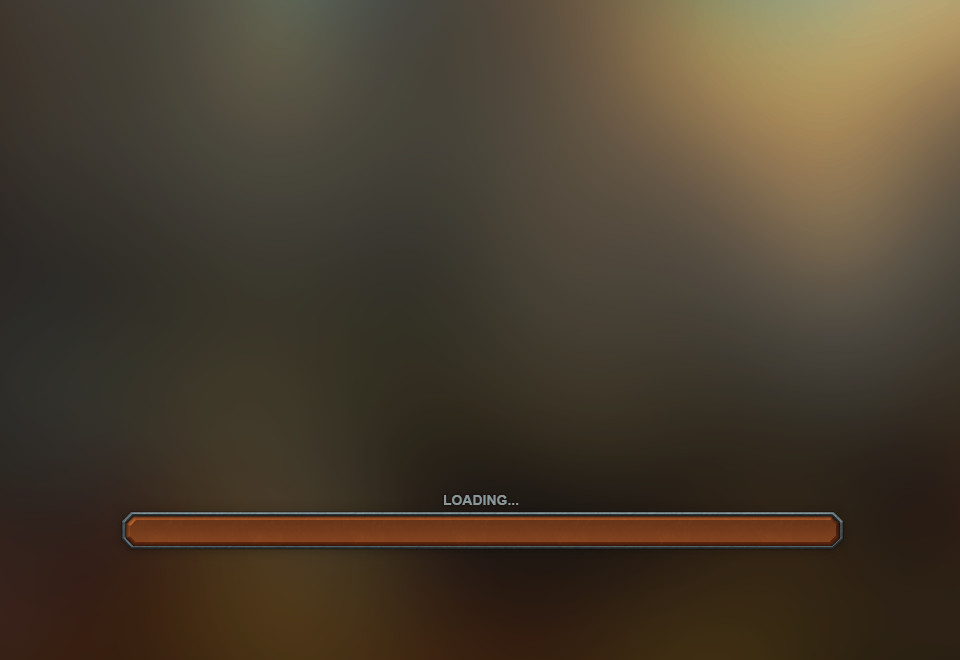
<style>
.page{position:relative;width:960px;height:660px}
.page>*{position:absolute;margin:0}
.t1{font:14px "Arial-BoldMT";color:#8a979a;text-transform:uppercase}
</style>
<div class="page">
<p class="t1" style="left:444px;top:495px;width:75px;height:10px">Loading...</p>
</div>
